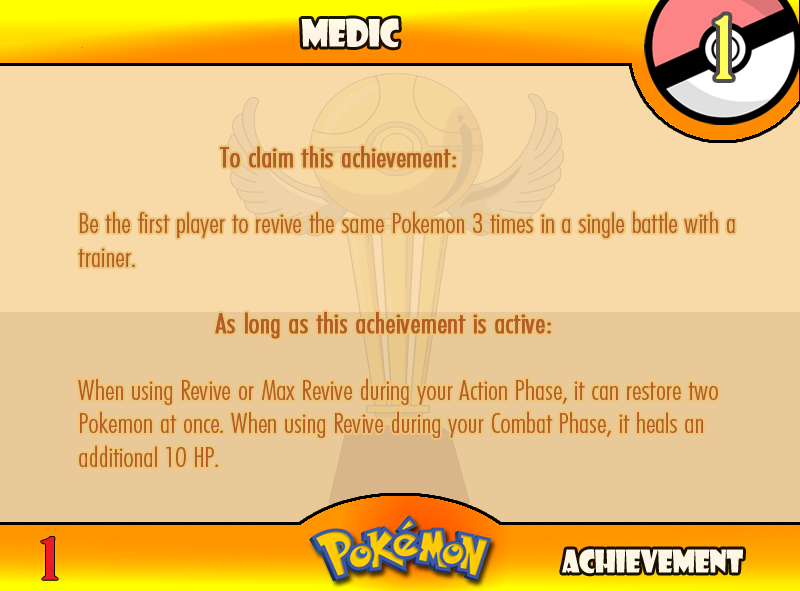
<style>
.page{position:relative;width:800px;height:591px;background:#f8d9a8}
.page>*{position:absolute;margin:0}
.t1{font:83.3px "BirchStd";letter-spacing:0.025em;color:#fffd59;font-weight:bold}
.t2{font:36.7px "ShowcardGothic-Reg";letter-spacing:-0.025em;color:#fff5e6;scale:0.91 1}
.t3{font:27.8px "FuturaCondensedBQ-Light";color:#b15c29;scale:1.08 1}
.t4{font:33.3px "FuturaCondensedBQ-Light";color:#b15c29;font-weight:bold;scale:1.08 1}
.t5{font:27.8px "FuturaCondensedBQ-Light";color:#b15c29;font-weight:bold;scale:1.08 1}
.t6{font:55.6px "BirchStd";color:#ed1c24;font-weight:bold;scale:1.5 1}
.t7{font:30.6px "ShowcardGothic-Reg";letter-spacing:-0.025em;color:#fff7e6;scale:0.91 1}
</style>
<div class="page">
<p class="t1" style="left:715px;top:15px;width:17px;height:64px">1</p>
<p class="t2" style="left:301px;top:18px;width:98px;height:30px">Medic</p>
<p class="t3" style="left:78px;top:146px;width:657px;height:321px"><span class="t4">          <br>      </span><span class="t5">To claim this achievement:<br><br></span> Be the first player to revive the same Pokemon 3 times in a single battle with a    trainer.<br><br><span class="t5">      As long as this acheivement is active:<br></span><br> When using Revive or Max Revive during your Action Phase, it can restore two    Pokemon at once. When using Revive during your Combat Phase, it heals an    additional 10 HP.</p>
<p class="t6" style="left:41px;top:537px;width:17px;height:43px">1</p>
<p class="t7" style="left:562px;top:549px;width:181px;height:25px">Achievement</p>
</div>
